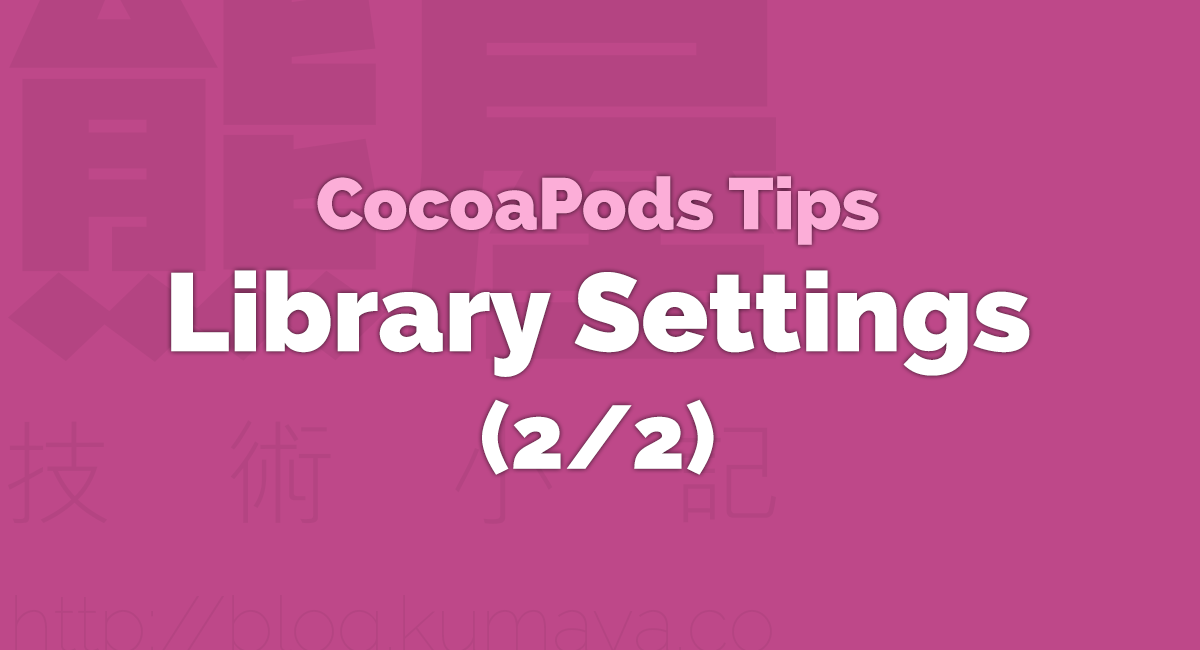
<style>
.page{position:relative;width:1200px;height:650px;background:#be4889}
.page>*{position:absolute;margin:0}
.t1{font:110.2px/121.9px "Raleway-Heavy";color:#ffffff}
.t2{font:72.7px/84.4px "Raleway-Heavy";color:#fcaed8}
.t3{font:89.3px/117.7px "Raleway-Heavy";color:#ffffff}
</style>
<div class="page">
<p class="t1" style="left:171px;top:176px;width:859px;height:299px;text-align:center"><span class="t2">CocoaPods Tips<br></span>Library Settings<br><span class="t3">(2/2)</span></p>
</div>
